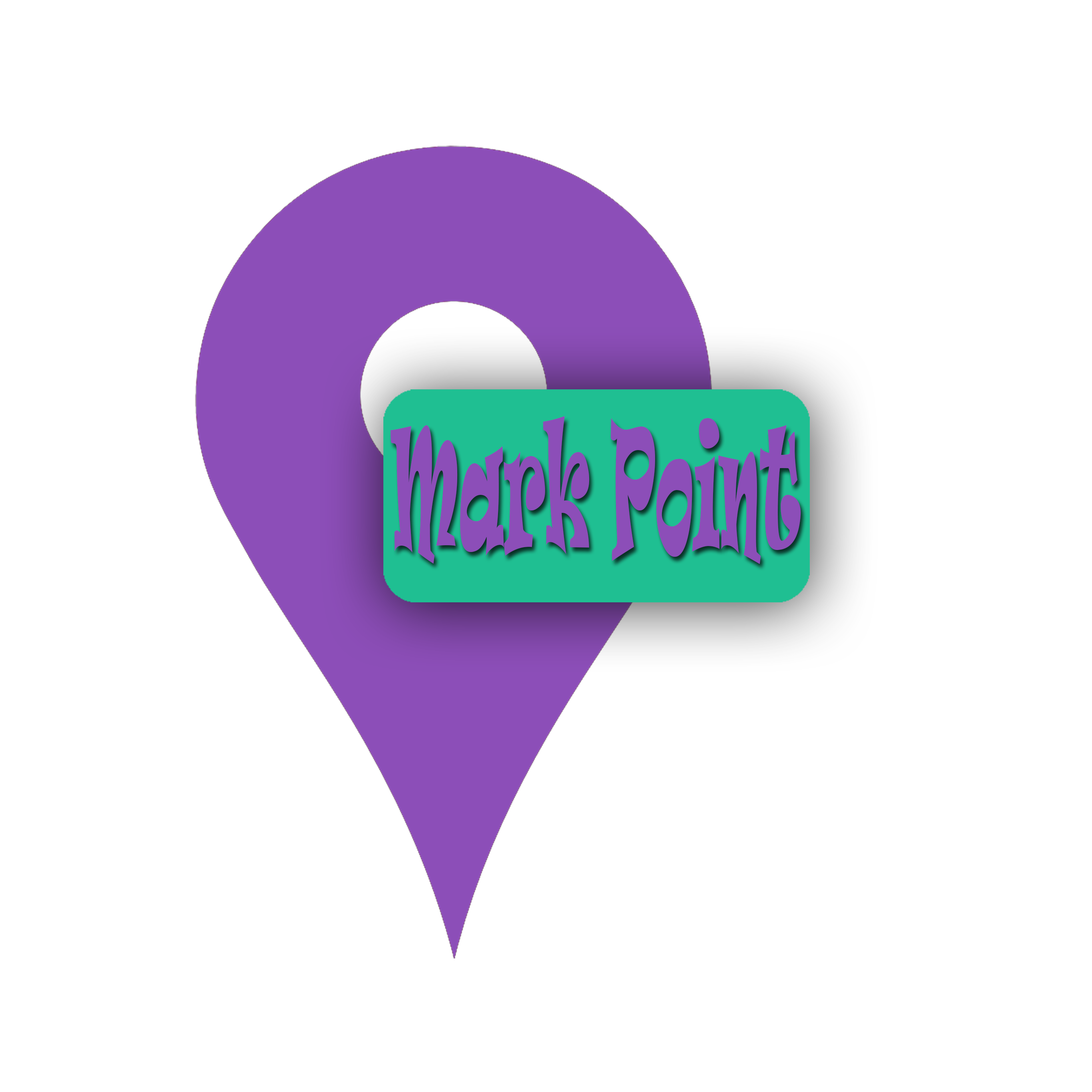
<style>
.page{position:relative;width:1092px;height:1092px;background:#ffffff}
.page>*{position:absolute;margin:0}
.t1{font:163.2px "Ravie";color:#8c4eb8;scale:0.33 1}
</style>
<div class="page">
<p class="t1" style="left:391px;top:416px;width:410px;height:148px">Mark Point</p>
</div>
